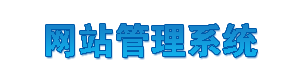
<style>
.page{position:relative;width:300px;height:80px;background:#ffffff}
.page>*{position:absolute;margin:0}
.t1{font:36px "FZDHTJW--GB1-0";color:#1497d8}
</style>
<div class="page">
<p class="t1" style="left:46px;top:24px;width:211px;height:33px">网站管理系统</p>
</div>
